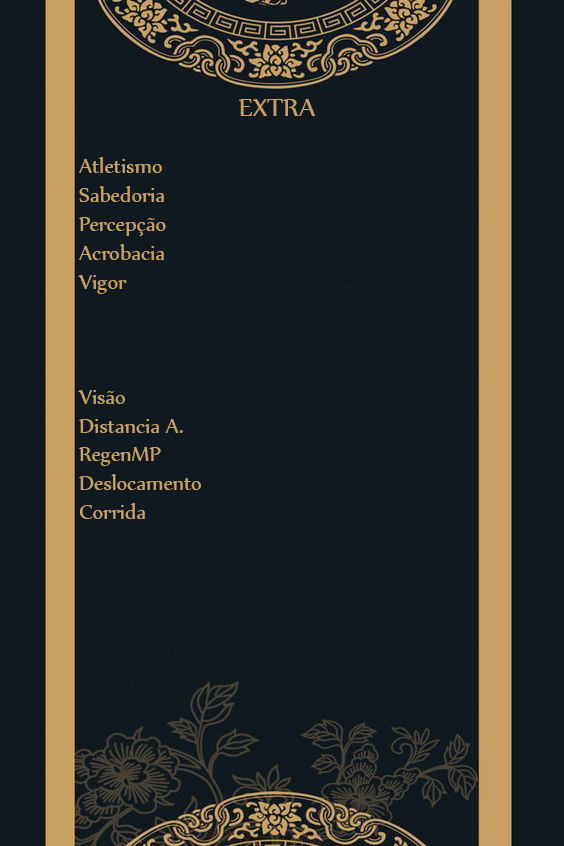
<style>
.page{position:relative;width:564px;height:846px;background:#101920}
.page>*{position:absolute;margin:0}
.t1{font:24px "Nyala-Regular";color:#c7a162}
.t2{font:30px "Nyala-Regular";color:#c7a162}
</style>
<div class="page">
<p class="t1" style="left:78px;top:99px;width:237px;height:420px;text-align:center"><span class="t2">EXTRA<br></span><br>Atletismo<br>Sabedoria<br>Percepção<br>Acrobacia<br>Vigor<br><br><br><br>Visão<br>Distancia A.<br>RegenMP<br>Deslocamento<br>Corrida</p>
</div>
